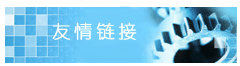
<style>
.page{position:relative;width:240px;height:66px}
.page>*{position:absolute;margin:0}
.t1{font:18px "YouYuan";letter-spacing:0.2em;color:#fffffe;font-weight:bold}
</style>
<div class="page">
<p class="t1" style="left:52px;top:22px;width:85px;height:18px">友情链接</p>
</div>
